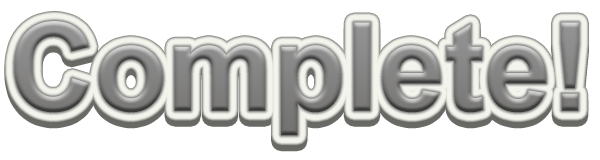
<style>
.page{position:relative;width:600px;height:160px;background:#ffffff}
.page>*{position:absolute;margin:0}
.t1{font:122.8px "Arial-BoldMT";scale:0.97 1}
</style>
<div class="page">
<p class="t1" style="left:14px;top:27px;width:565px;height:115px">Complete!</p>
<p class="t1" style="left:14px;top:21px;width:565px;height:115px">Complete!</p>
</div>
